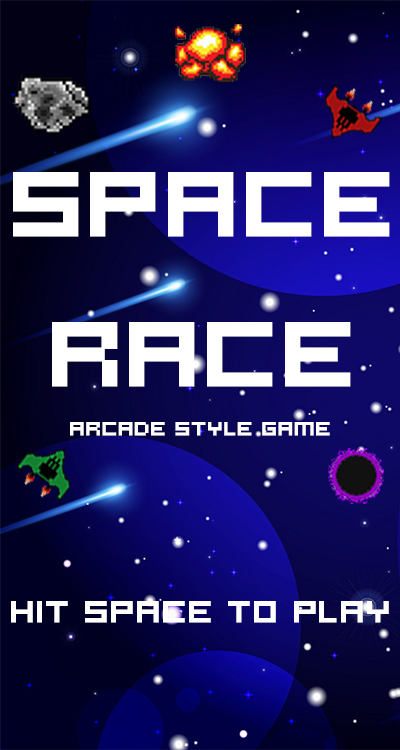
<style>
.page{position:relative;width:400px;height:750px}
.page>*{position:absolute;margin:0}
.t1{font:100px/150px "Hooge0553";color:#ffffff;font-weight:bold}
.t2{font:20.8px "Hooge0553";color:#ffffff;font-weight:bold}
.t3{font:33.3px "Hooge0553";color:#ffffff;font-weight:bold}
</style>
<div class="page">
<p class="t1" style="left:13px;top:172px;width:377px;height:215px;text-align:center">SPACE<br>RACE</p>
<p class="t2" style="left:70px;top:422px;width:260px;height:14px">ARCADE STYLE GAME</p>
<p class="t3" style="left:11px;top:601px;width:378px;height:22px">hIT SPACE TO PLAY</p>
</div>
